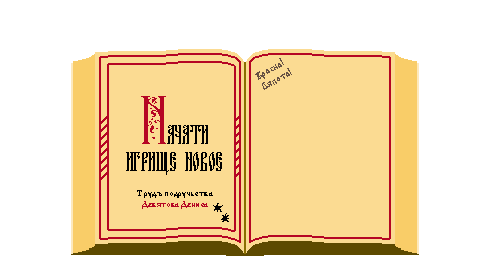
<style>
.page{position:relative;width:490px;height:270px;background:#ffffff}
.page>*{position:absolute;margin:0}
.t1{font:10px "CyrillicOldEditedbyme-Bold";color:#665144}
.t2{font:72px "TDElena2021";color:#b50624;scale:1.5 1}
.t3{font:36px "FitaVjaz";color:#000000}
.t4{font:9px "CyrillicOldEditedbyme-Bold";color:#000000}
.t5{font:9px "CyrillicOldEditedbyme-Bold";color:#b50624}
</style>
<div class="page">
<p class="t1" style="left:255px;top:58px;width:37px;height:32px;text-align:center;rotate:-29deg">Красна! <br>Ляпота!</p>
<p class="t2" style="left:141px;top:96px;width:25px;height:48px">Н</p>
<p class="t3" style="left:167px;top:125px;width:41px;height:19px">ачати</p>
<p class="t3" style="left:126px;top:152px;width:96px;height:23px">игрище новое</p>
<p class="t4" style="left:137px;top:190px;width:76px;height:19px;text-align:center">Трудъ подручьства<br><span class="t5">Девятова Дениса</span></p>
</div>
